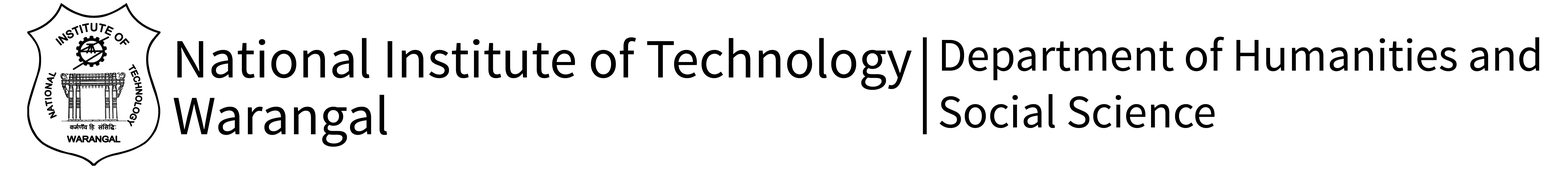
<style>
.page{position:relative;width:1568px;height:173px;background:#ffffff}
.page>*{position:absolute;margin:0}
.t1{font:55.3px/28.4px "SourceSansPro-Regular";color:#000000}
.t2{font:46.8px/28.4px "SourceSansPro-Regular";color:#000000}
</style>
<div class="page">
<p class="t1" style="left:174px;top:37px;width:738px;height:110px">National Institute of Technology <br><br>Warangal</p>
<p class="t2" style="left:940px;top:36px;width:599px;height:92px">Department of Humanities and <br><br>Social Science</p>
</div>
